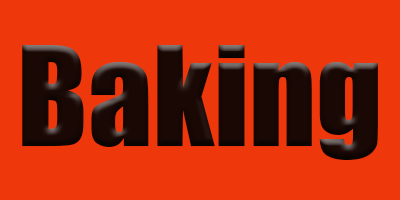
<style>
.page{position:relative;width:400px;height:200px;background:#ef370c}
.page>*{position:absolute;margin:0}
.t1{font:128.2px "Impact";color:#190804}
</style>
<div class="page">
<p class="t1" style="left:22px;top:45px;width:356px;height:115px">Baking</p>
</div>
